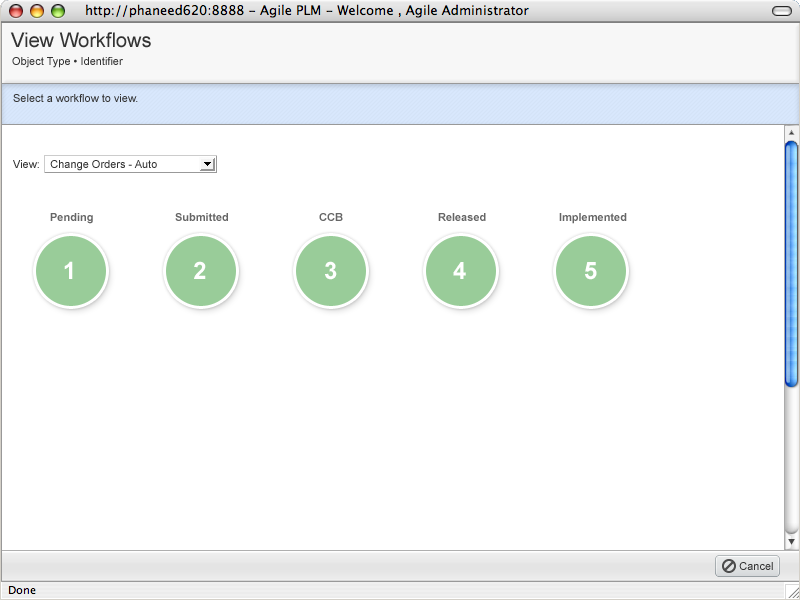
<style>
.page{position:relative;width:800px;height:600px;background:#ffffff}
.page>*{position:absolute;margin:0}
.t1{font:20px "ArialMT";color:#333333}
.t2{font:11px "ArialMT";color:#333333}
.t3{font:11px "Arial-BoldMT";color:#666666}
.t4{font:24px "Arial-BoldMT";color:#ffffff}
</style>
<div class="page">
<p class="t1" style="left:10px;top:32px;width:141px;height:16px">View Workflows</p>
<p class="t2" style="left:12px;top:57px;width:111px;height:11px">Object Type • Identifier</p>
<p class="t2" style="left:13px;top:94px;width:125px;height:8px">Select a workflow to view.</p>
<p class="t2" style="left:13px;top:160px;width:26px;height:8px">View:</p>
<p class="t3" style="left:50px;top:213px;width:43px;height:11px">Pending</p>
<p class="t3" style="left:175px;top:213px;width:53px;height:8px">Submitted</p>
<p class="t3" style="left:319px;top:213px;width:24px;height:8px">CCB</p>
<p class="t3" style="left:438px;top:213px;width:48px;height:8px">Released</p>
<p class="t3" style="left:559px;top:213px;width:68px;height:11px">Implemented</p>
<p class="t4" style="left:64px;top:261px;width:9px;height:18px">1</p>
<p class="t4" style="left:194px;top:261px;width:12px;height:18px">2</p>
<p class="t4" style="left:325px;top:261px;width:12px;height:19px">3</p>
<p class="t4" style="left:453px;top:262px;width:13px;height:17px">4</p>
<p class="t4" style="left:585px;top:262px;width:12px;height:18px">5</p>
<p class="t2" style="left:739px;top:562px;width:34px;height:8px">Cancel</p>
</div>
